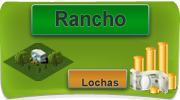
<style>
.page{position:relative;width:180px;height:100px}
.page>*{position:absolute;margin:0}
.t1{font:20.8px "Arial-BoldMT";color:#303030;scale:0.94 1}
.t2{font:10.4px "Arial-BoldMT";color:#303030;scale:1.03 1}
.t3{font:20.8px "Arial-BoldMT";color:#303030;scale:1.03 1}
</style>
<div class="page">
<p class="t1" style="left:56px;top:11px;width:70px;height:16px">Rancho</p>
<p class="t2" style="left:82px;top:78px;width:37px;height:9px"><span class="t3"><br></span>Lochas</p>
</div>
